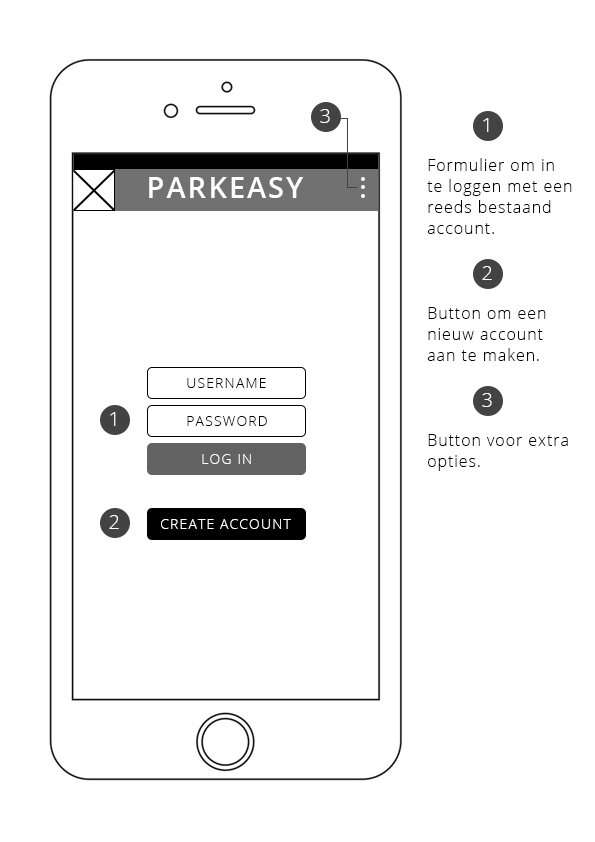
<style>
.page{position:relative;width:595px;height:842px;background:#ffffff}
.page>*{position:absolute;margin:0}
.t1{font:20px "OpenSans-Light";letter-spacing:0.06em;color:#ffffff}
.t2{font:16px/21px "OpenSans-Light";letter-spacing:0.06em;color:#000000}
.t3{font:29.4px "OpenSans-Semibold";letter-spacing:0.06em;color:#ffffff}
.t4{font:14.5px "OpenSans-Light";letter-spacing:0.06em;color:#000000}
.t5{font:14.5px "OpenSans-Light";letter-spacing:0.06em;color:#ffffff}
</style>
<div class="page">
<p class="t1" style="left:320px;top:109px;width:10px;height:14px">3</p>
<p class="t1" style="left:483px;top:118px;width:6px;height:14px">1</p>
<p class="t2" style="left:427px;top:158px;width:145px;height:76px">Formulier om in <br>te loggen met een<br>reeds bestaand<br>account.</p>
<p class="t3" style="left:149px;top:177px;width:154px;height:21px">PARKEASY</p>
<p class="t1" style="left:482px;top:266px;width:10px;height:14px">2</p>
<p class="t2" style="left:427px;top:307px;width:119px;height:54px">Button om een<br>nieuw account<br>aan te maken.</p>
<p class="t4" style="left:187px;top:378px;width:79px;height:10px">USERNAME</p>
<p class="t1" style="left:482px;top:393px;width:10px;height:14px">3</p>
<p class="t1" style="left:110px;top:412px;width:6px;height:14px">1</p>
<p class="t4" style="left:187px;top:416px;width:80px;height:10px">PASSWORD</p>
<p class="t2" style="left:428px;top:434px;width:140px;height:37px">Button voor extra<br>opties.</p>
<p class="t5" style="left:202px;top:454px;width:49px;height:10px">LOG IN</p>
<p class="t1" style="left:109px;top:515px;width:10px;height:14px">2</p>
<p class="t5" style="left:161px;top:519px;width:130px;height:10px">CREATE ACCOUNT</p>
</div>
